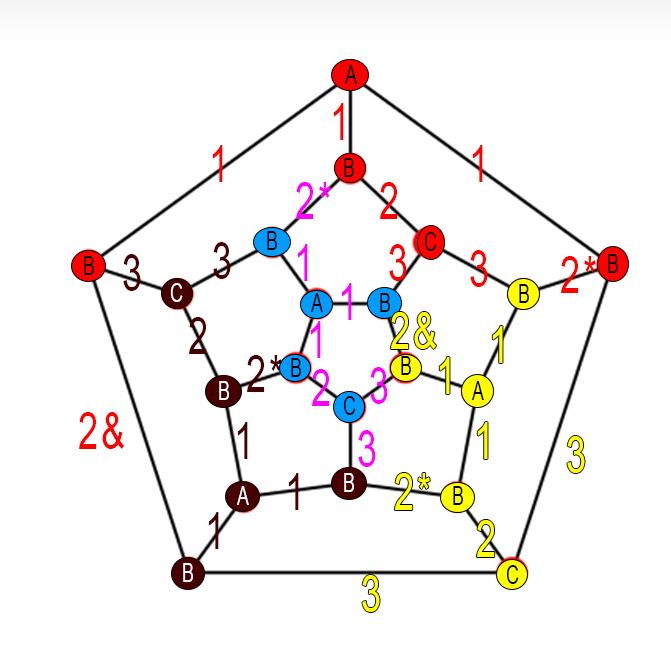
<style>
.page{position:relative;width:671px;height:652px;background:#ffffff}
.page>*{position:absolute;margin:0}
.t1{font:26.1px "ArialMT";letter-spacing:0.08em;color:#000000;scale:0.69 1}
.t2{font:52.2px "ArialMT";letter-spacing:0.08em;color:#ff0000;scale:0.69 1}
.t3{font:52.2px "ArialMT";letter-spacing:0.08em;color:#ff00ff;scale:0.69 1}
.t4{font:52.2px "ArialMT";letter-spacing:0.08em;color:#460000;scale:0.69 1}
.t5{font:26.1px "ArialMT";letter-spacing:0.08em;color:#ffffff;scale:0.69 1}
.t6{font:52.2px "ArialMT";letter-spacing:0.08em;color:#ffff00;scale:0.69 1}
</style>
<div class="page">
<p class="t1" style="left:345px;top:65px;width:12px;height:19px">A</p>
<p class="t2" style="left:333px;top:103px;width:11px;height:37px">1</p>
<p class="t2" style="left:212px;top:145px;width:11px;height:37px">1</p>
<p class="t2" style="left:472px;top:145px;width:11px;height:37px">1</p>
<p class="t1" style="left:344px;top:158px;width:10px;height:19px">B</p>
<p class="t3" style="left:296px;top:182px;width:35px;height:37px">2*</p>
<p class="t2" style="left:380px;top:182px;width:18px;height:37px">2</p>
<p class="t1" style="left:267px;top:231px;width:10px;height:19px">B</p>
<p class="t1" style="left:424px;top:232px;width:13px;height:19px">C</p>
<p class="t4" style="left:213px;top:242px;width:18px;height:37px">3</p>
<p class="t3" style="left:297px;top:244px;width:11px;height:37px">1</p>
<p class="t2" style="left:389px;top:244px;width:18px;height:37px">3</p>
<p class="t1" style="left:84px;top:256px;width:10px;height:19px">B</p>
<p class="t4" style="left:123px;top:254px;width:18px;height:37px">3</p>
<p class="t2" style="left:470px;top:250px;width:18px;height:37px">3</p>
<p class="t2" style="left:561px;top:256px;width:35px;height:37px">2*</p>
<p class="t1" style="left:608px;top:254px;width:10px;height:19px">B</p>
<p class="t5" style="left:170px;top:283px;width:13px;height:19px">C</p>
<p class="t1" style="left:311px;top:293px;width:12px;height:19px">A</p>
<p class="t3" style="left:341px;top:283px;width:11px;height:37px">1</p>
<p class="t1" style="left:380px;top:293px;width:10px;height:19px">B</p>
<p class="t1" style="left:519px;top:284px;width:10px;height:19px">B</p>
<p class="t4" style="left:189px;top:317px;width:18px;height:37px">2</p>
<p class="t6" style="left:391px;top:312px;width:46px;height:37px">2&amp;</p>
<p class="t3" style="left:310px;top:321px;width:11px;height:37px">1</p>
<p class="t6" style="left:492px;top:326px;width:11px;height:37px">1</p>
<p class="t4" style="left:247px;top:355px;width:35px;height:37px">2*</p>
<p class="t1" style="left:291px;top:358px;width:10px;height:19px">B</p>
<p class="t1" style="left:401px;top:356px;width:10px;height:19px">B</p>
<p class="t6" style="left:439px;top:357px;width:11px;height:37px">1</p>
<p class="t3" style="left:312px;top:369px;width:18px;height:37px">2</p>
<p class="t3" style="left:370px;top:367px;width:18px;height:37px">3</p>
<p class="t5" style="left:219px;top:381px;width:10px;height:19px">B</p>
<p class="t1" style="left:472px;top:381px;width:12px;height:19px">A</p>
<p class="t1" style="left:343px;top:396px;width:13px;height:19px">C</p>
<p class="t2" style="left:79px;top:412px;width:46px;height:37px">2&amp;</p>
<p class="t4" style="left:237px;top:422px;width:11px;height:37px">1</p>
<p class="t6" style="left:477px;top:422px;width:11px;height:37px">1</p>
<p class="t3" style="left:358px;top:430px;width:18px;height:37px">3</p>
<p class="t6" style="left:567px;top:436px;width:18px;height:37px">3</p>
<p class="t4" style="left:288px;top:473px;width:11px;height:37px">1</p>
<p class="t5" style="left:344px;top:473px;width:10px;height:19px">B</p>
<p class="t6" style="left:395px;top:473px;width:35px;height:37px">2*</p>
<p class="t5" style="left:237px;top:486px;width:12px;height:19px">A</p>
<p class="t1" style="left:453px;top:486px;width:10px;height:19px">B</p>
<p class="t4" style="left:208px;top:512px;width:11px;height:37px">1</p>
<p class="t6" style="left:477px;top:520px;width:18px;height:37px">2</p>
<p class="t5" style="left:183px;top:563px;width:10px;height:19px">B</p>
<p class="t1" style="left:506px;top:565px;width:13px;height:19px">C</p>
<p class="t6" style="left:362px;top:575px;width:18px;height:37px">3</p>
</div>
